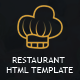
<style>
.page{position:relative;width:80px;height:80px}
.page>*{position:absolute;margin:0}
.t1{font:9.2px/10.3px "TrebuchetMS";letter-spacing:0.045em;color:#ffffff;text-transform:uppercase;scale:0.94 1}
</style>
<div class="page">
<p class="t1" style="left:6px;top:57px;width:67px;height:16px;text-align:center">Restaurant <br>HTML Template</p>
</div>
